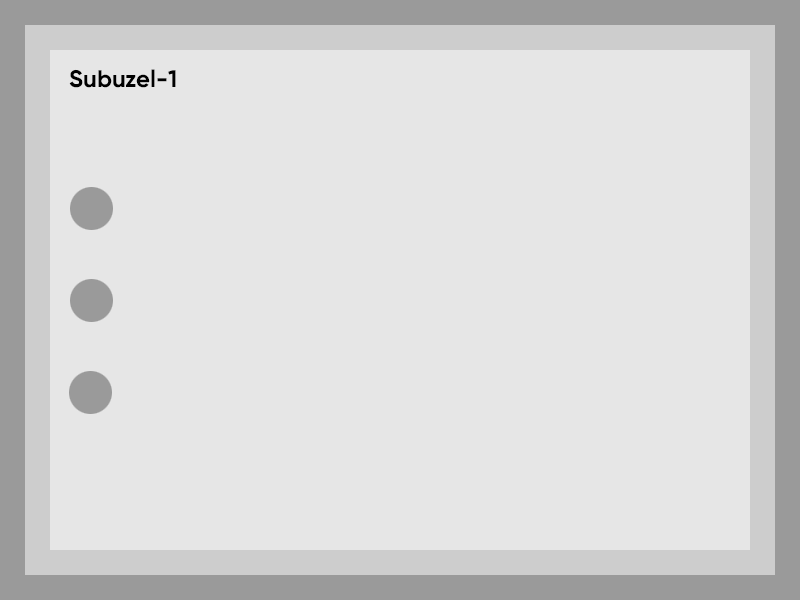
<style>
.page{position:relative;width:800px;height:600px;background:#e6e6e6}
.page>*{position:absolute;margin:0}
.t1{font:24px "Gilroy-Bold";color:#000000}
</style>
<div class="page">
<p class="t1" style="left:69px;top:69px;width:107px;height:19px">Subuzel-1</p>
</div>
